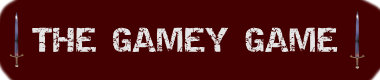
<style>
.page{position:relative;width:380px;height:80px;background:#440000}
.page>*{position:absolute;margin:0}
.t1{font:24px "Destroy";color:#e4e4e4}
</style>
<div class="page">
<p class="t1" style="left:32px;top:27px;width:306px;height:25px">THE GAMEY GAME</p>
</div>
